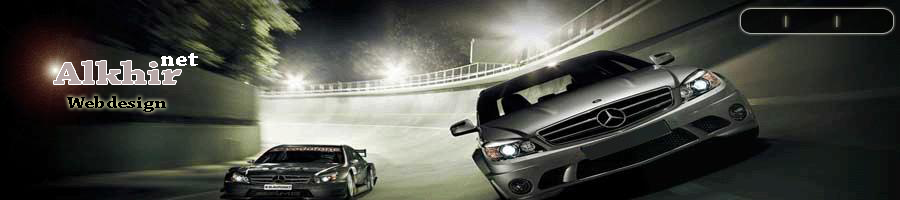
<style>
.page{position:relative;width:900px;height:200px}
.page>*{position:absolute;margin:0}
.t1{font:23.1px "ChaparralPro-Bold";color:#ffffff;scale:1.07 1}
.t2{font:16.7px "ChaparralPro-Bold";color:#000000;scale:1.22 1}
</style>
<div class="page">
<p class="t1" style="left:161px;top:53px;width:37px;height:13px">net</p>
<p class="t2" style="left:67px;top:96px;width:99px;height:16px">Webdesign</p>
</div>
